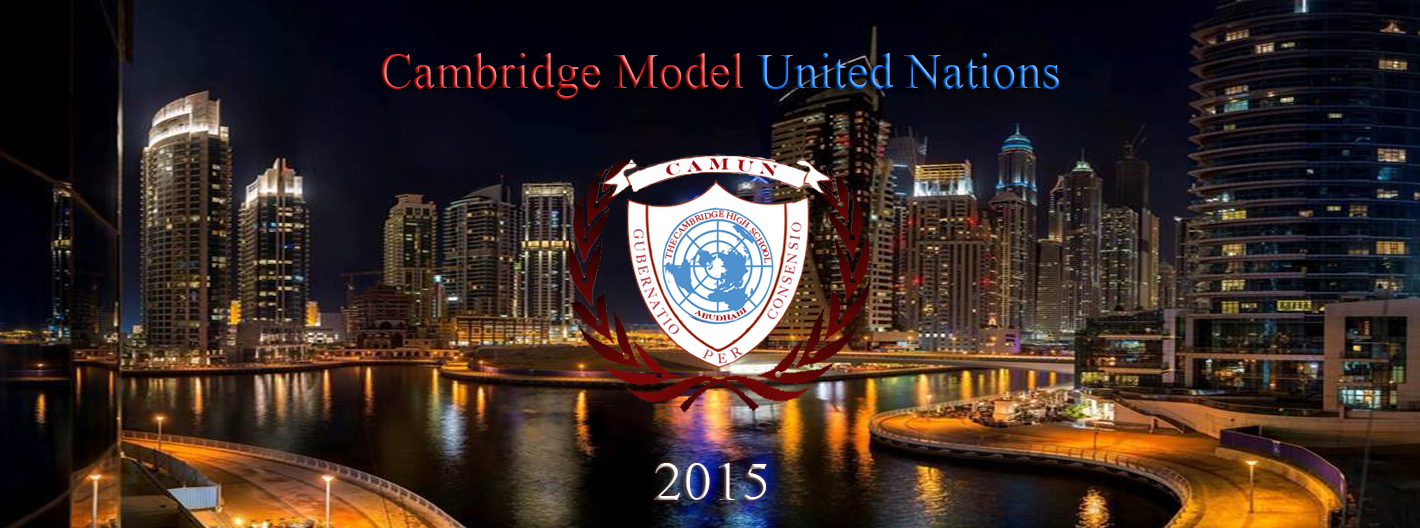
<style>
.page{position:relative;width:1420px;height:528px}
.page>*{position:absolute;margin:0}
.t1{font:50px "TimesNewRomanPSMT"}
.t2{font:55px "TimesNewRomanPSMT";scale:1.06 1}
</style>
<div class="page">
<p class="t1" style="left:380px;top:53px;width:679px;height:46px">Cambridge Model United Nations</p>
<p class="t2" style="left:654px;top:463px;width:113px;height:37px">2015</p>
</div>
